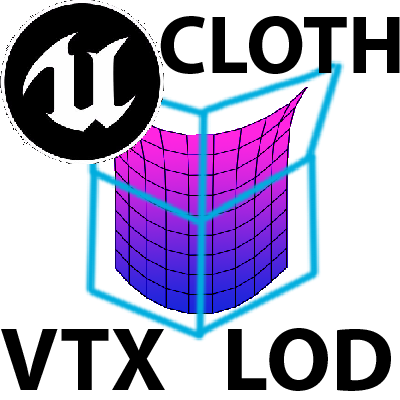
<style>
.page{position:relative;width:400px;height:400px;background:#ffffff}
.page>*{position:absolute;margin:0}
.t1{font:82.4px "MyriadPro-Bold";color:#000000}
.t2{font:91.1px "MyriadPro-Bold";color:#000000}
</style>
<div class="page">
<p class="t1" style="left:160px;top:16px;width:240px;height:58px">CLOTH</p>
<p class="t2" style="left:1px;top:328px;width:390px;height:63px">VTX   LOD</p>
</div>
